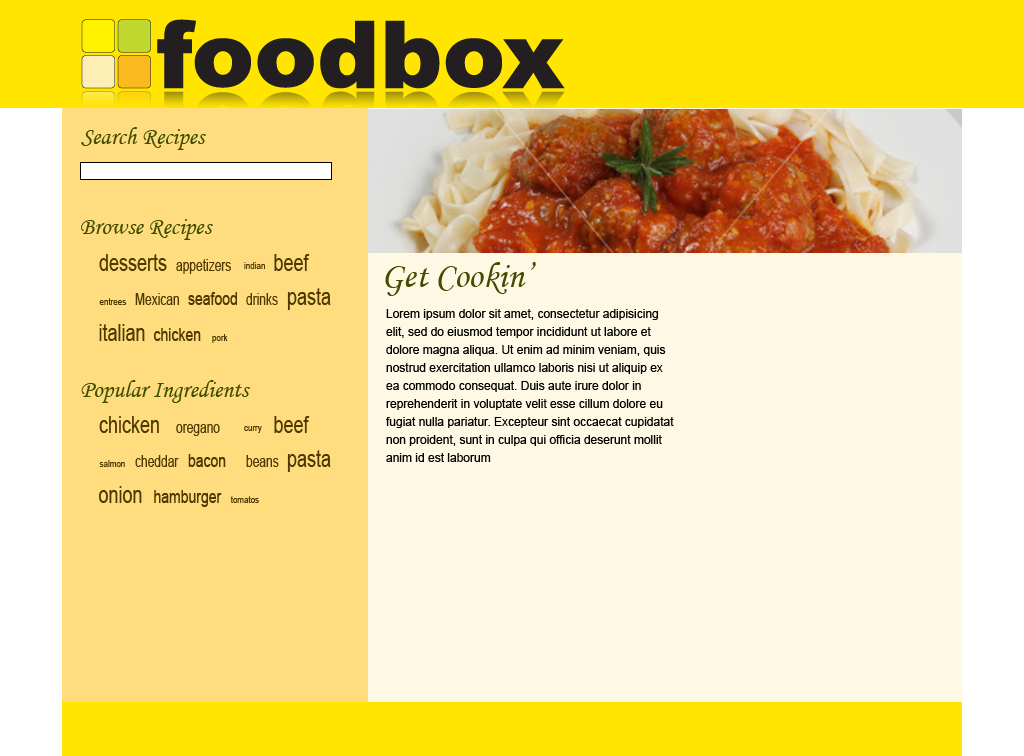
<style>
.page{position:relative;width:1024px;height:756px;background:#fff8e4}
.page>*{position:absolute;margin:0}
.t1{font:24px "MonotypeCorsiva";color:#414d00}
.t2{font:23.4px "ArialMT";color:#4d3900;scale:0.77 1}
.t3{font:15.6px "ArialMT";color:#4d3900;scale:0.77 1}
.t4{font:10.4px "ArialMT";color:#4d3900;scale:0.77 1}
.t5{font:36px "MonotypeCorsiva";color:#414d00}
.t6{font:18.2px "ArialMT";color:#4d3900;scale:0.77 1}
.t7{font:12px/18px "ArialMT";color:#000000}
</style>
<div class="page">
<p class="t1" style="left:81px;top:127px;width:125px;height:23px">Search Recipes</p>
<p class="t1" style="left:81px;top:219px;width:132px;height:21px">Browse Recipes</p>
<p class="t2" style="left:99px;top:254px;width:68px;height:17px">desserts</p>
<p class="t2" style="left:274px;top:254px;width:36px;height:17px">beef</p>
<p class="t3" style="left:176px;top:259px;width:55px;height:15px">appetizers</p>
<p class="t4" style="left:244px;top:262px;width:21px;height:7px">indian</p>
<p class="t5" style="left:385px;top:262px;width:151px;height:34px">Get Cookin’</p>
<p class="t3" style="left:135px;top:293px;width:44px;height:12px">Mexican</p>
<p class="t6" style="left:188px;top:292px;width:49px;height:13px">seafood</p>
<p class="t3" style="left:246px;top:293px;width:32px;height:12px">drinks</p>
<p class="t2" style="left:287px;top:288px;width:44px;height:22px">pasta</p>
<p class="t4" style="left:99px;top:298px;width:28px;height:7px">entrees</p>
<p class="t7" style="left:386px;top:309px;width:288px;height:153px">Lorem ipsum dolor sit amet, consectetur adipisicing elit, sed do eiusmod tempor incididunt ut labore et dolore magna aliqua. Ut enim ad minim veniam, quis nostrud exercitation ullamco laboris nisi ut aliquip ex ea commodo consequat. Duis aute irure dolor in reprehenderit in voluptate velit esse cillum dolore eu fugiat nulla pariatur. Excepteur sint occaecat cupidatat non proident, sunt in culpa qui officia deserunt mollit anim id est laborum</p>
<p class="t2" style="left:99px;top:324px;width:46px;height:17px">italian</p>
<p class="t6" style="left:154px;top:328px;width:47px;height:13px">chicken</p>
<p class="t4" style="left:212px;top:334px;width:16px;height:9px">pork</p>
<p class="t1" style="left:81px;top:380px;width:169px;height:23px">Popular Ingredients</p>
<p class="t2" style="left:99px;top:416px;width:60px;height:17px">chicken</p>
<p class="t3" style="left:176px;top:424px;width:44px;height:12px">oregano</p>
<p class="t2" style="left:274px;top:416px;width:36px;height:17px">beef</p>
<p class="t4" style="left:244px;top:426px;width:18px;height:7px">curry</p>
<p class="t4" style="left:99px;top:460px;width:26px;height:7px">salmon</p>
<p class="t3" style="left:135px;top:455px;width:44px;height:12px">cheddar</p>
<p class="t6" style="left:188px;top:454px;width:38px;height:13px">bacon</p>
<p class="t3" style="left:246px;top:455px;width:33px;height:12px">beans</p>
<p class="t2" style="left:287px;top:450px;width:44px;height:22px">pasta</p>
<p class="t2" style="left:99px;top:486px;width:43px;height:17px">onion</p>
<p class="t6" style="left:154px;top:490px;width:68px;height:17px">hamburger</p>
<p class="t4" style="left:230px;top:496px;width:29px;height:7px">tomatos</p>
</div>
